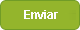
<style>
.page{position:relative;width:80px;height:30px;background:#94b52c}
.page>*{position:absolute;margin:0}
.t1{font:12px "Arial-BoldMT";color:#fefefe}
</style>
<div class="page">
<p class="t1" style="left:24px;top:10px;width:34px;height:9px">Enviar</p>
</div>
